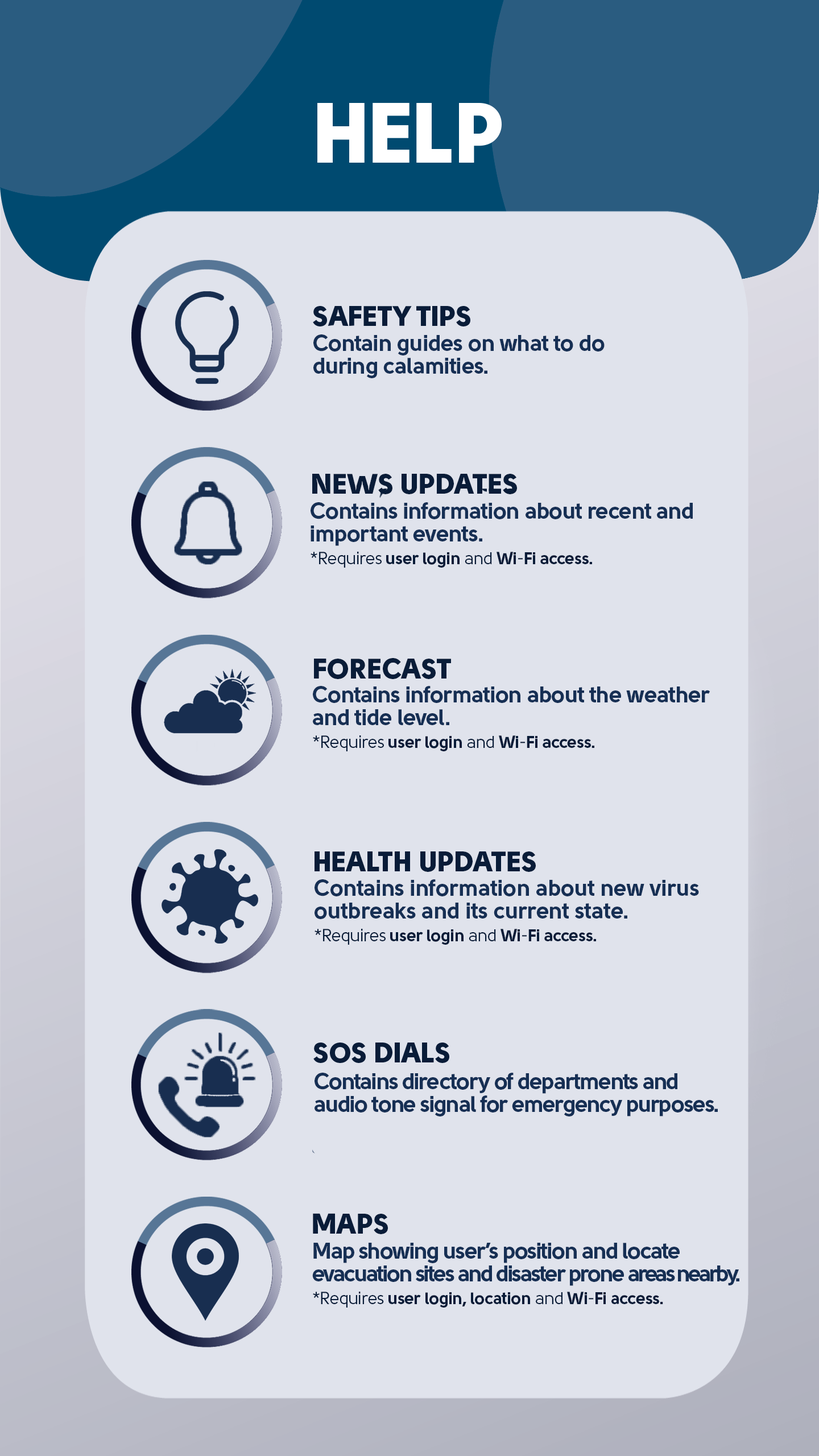
<style>
.page{position:relative;width:819px;height:1456px;background:#e0e3ec}
.page>*{position:absolute;margin:0}
.t1{font:22.7px/22.7px "Solomon-Sans-Bold";letter-spacing:-0.025em;color:#162f54}
.t2{font:28.4px "Solomon-Sans-Black";color:#091c38}
.t3{font:17.1px/22.7px "Solomon-Sans-Normal";letter-spacing:-0.025em;color:#091c38}
.t4{font:17.1px/22.7px "Solomon-Sans-Bold";letter-spacing:-0.025em;color:#091c38}
.t5{font:22.7px/22.7px "Solomon-Sans-Bold";letter-spacing:-0.01em;color:#162f54}
.t6{font:22.7px/22.7px "Solomon-Sans-Bold";letter-spacing:-0.05em;color:#162f54}
.t7{font:22.7px/22.7px "Solomon-Sans-Bold";letter-spacing:-0.07em;color:#162f54}
.t8{font:22.7px/22.7px "Solomon-Sans-Bold";letter-spacing:-0.1em;color:#162f54}
</style>
<div class="page">
<p class="t1" style="left:313px;top:334px;width:292px;height:44px">Contain guides on what to do<br>during calamities.</p>
<p class="t2" style="left:312px;top:474px;width:205px;height:20px">NEWS UPDATES</p>
<p class="t1" style="left:311px;top:502px;width:382px;height:66px">Contains information about recent and<br>important events.<br><span class="t3">*Requires </span><span class="t4">user login</span><span class="t3"> and </span><span class="t4">Wi</span><span class="t3">-</span><span class="t4">Fi access.</span></p>
<p class="t2" style="left:314px;top:658px;width:137px;height:21px">FORECAST</p>
<p class="t1" style="left:313px;top:686px;width:397px;height:65px">Contains information about the weather<br>and tide level.<br><span class="t3">*Requires </span><span class="t4">user login</span><span class="t3"> and </span><span class="t4">Wi</span><span class="t3">-</span><span class="t4">Fi access.</span></p>
<p class="t2" style="left:315px;top:851px;width:221px;height:21px">HEALTH UPDATES</p>
<p class="t5" style="left:315px;top:879px;width:384px;height:66px">Contains information about new virus<br>outbreaks and its current state. <br><span class="t3">*Requires </span><span class="t4">user login</span><span class="t3"> and </span><span class="t4">Wi</span><span class="t3">-</span><span class="t4">Fi access.</span></p>
<p class="t6" style="left:315px;top:1073px;width:403px;height:43px">Contains directory of departments and<br>audio tone signal for emergency purposes.</p>
<p class="t2" style="left:313px;top:1213px;width:75px;height:21px">MAPS</p>
<p class="t6" style="left:312px;top:1243px;width:427px;height:65px">Map showing user’s position and locate<br><span class="t7">evacuation sites and disaster prone </span><span class="t8">areas nearby.<br></span><span class="t3">*Requires </span><span class="t4">user login, location</span><span class="t3"> and </span><span class="t4">Wi</span><span class="t3">-</span><span class="t4">Fi access.</span></p>
</div>
